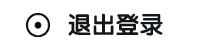
<style>
.page{position:relative;width:207px;height:48px;background:#ffffff}
.page>*{position:absolute;margin:0}
.t1{font:24px "FZY4JW--GB1-0";color:#14171a}
</style>
<div class="page">
<p class="t1" style="left:68px;top:13px;width:95px;height:23px">退出登录</p>
</div>
